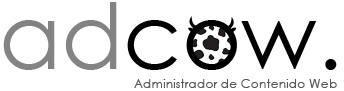
<style>
.page{position:relative;width:344px;height:91px;background:#ffffff}
.page>*{position:absolute;margin:0}
.t1{font:90.8px "CenturyGothic";color:#000000}
.t2{font:90.8px "CenturyGothic";color:#838383}
.t3{font:12.3px "CenturyGothic";color:#59595a}
</style>
<div class="page">
<p class="t1" style="left:3px;top:2px;width:334px;height:68px"><span class="t2">ad</span>cow.</p>
<p class="t3" style="left:134px;top:79px;width:203px;height:9px">Administrador de Contenido Web</p>
</div>
